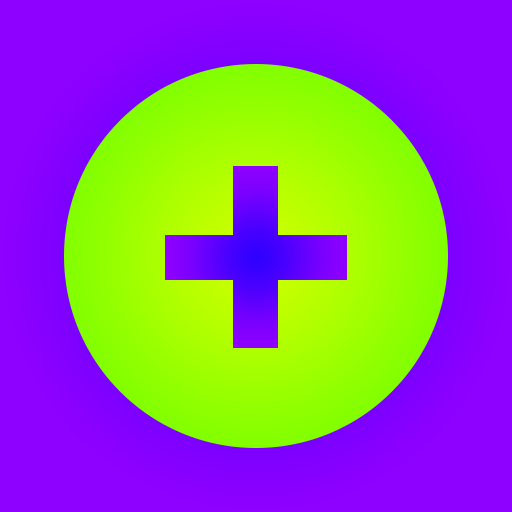
<style>
.page{position:relative;width:512px;height:512px;background:#8e00ff}
.page>*{position:absolute;margin:0}
.t1{font:364.4px "Terminal"}
</style>
<div class="page">
<p class="t1" style="left:165px;top:166px;width:182px;height:182px">+</p>
</div>
